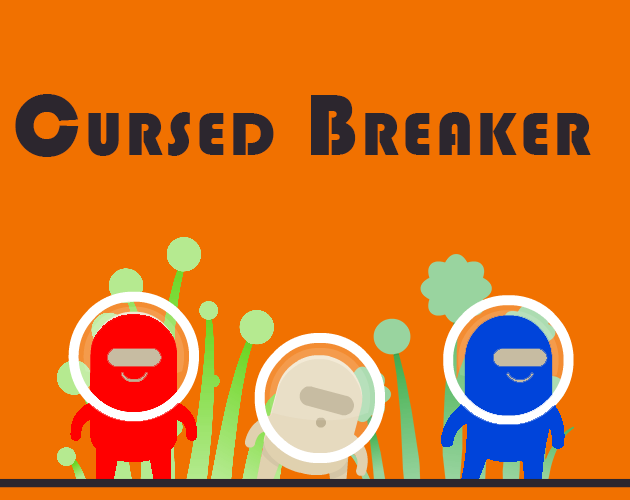
<style>
.page{position:relative;width:630px;height:500px;background:#f17100}
.page>*{position:absolute;margin:0}
.t1{font:90px "Bauhaus93";letter-spacing:0.05em;color:#2c262e;font-variant:small-caps}
</style>
<div class="page">
<p class="t1" style="left:15px;top:94px;width:576px;height:63px">Cursed Breaker</p>
</div>
